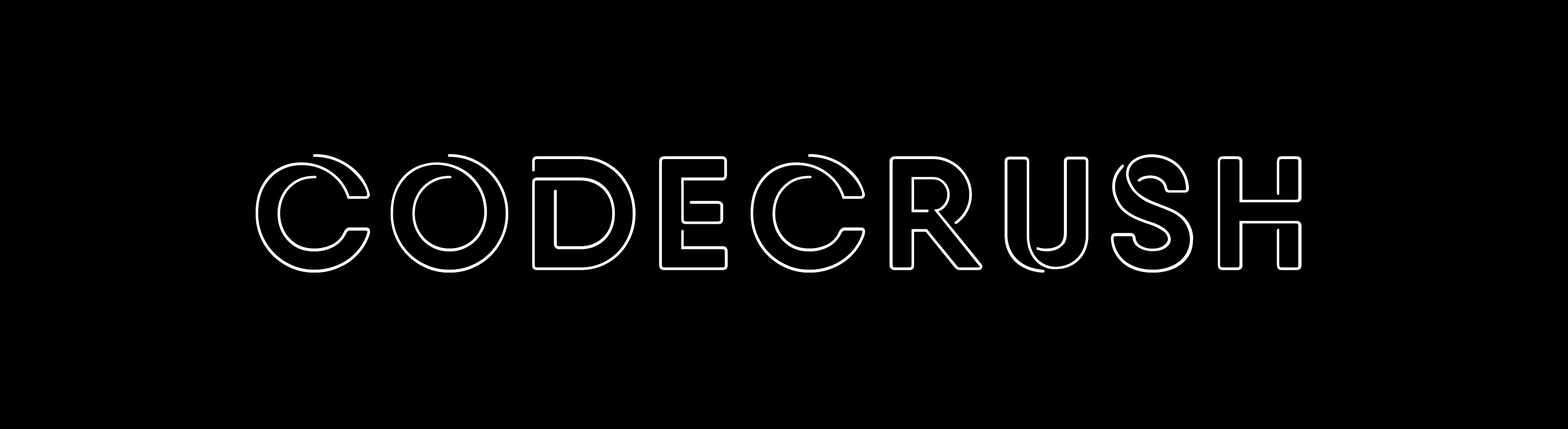
<style>
.page{position:relative;width:1568px;height:429px;background:#000000}
.page>*{position:absolute;margin:0}
.t1{font:186.2px "NEON";letter-spacing:0.081em;color:#ffffff}
</style>
<div class="page">
<p class="t1" style="left:255px;top:154px;width:1047px;height:119px">codecrush</p>
</div>
